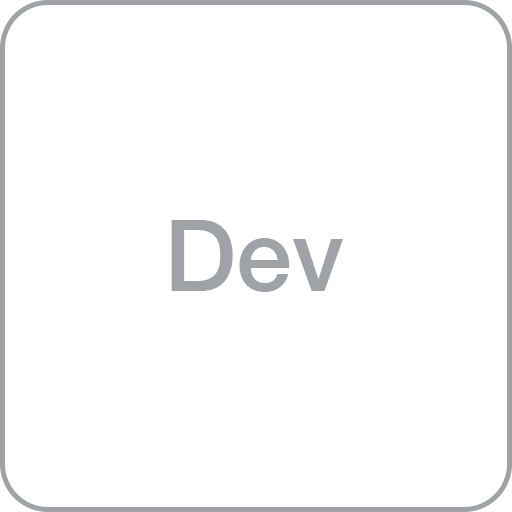
<style>
.page{position:relative;width:512px;height:512px;background:#ffffff}
.page>*{position:absolute;margin:0}
.t1{font:100px "HelveticaNeue-Medium";color:#9fa3a7}
</style>
<div class="page">
<p class="t1" style="left:171px;top:220px;width:172px;height:72px">Dev</p>
</div>
